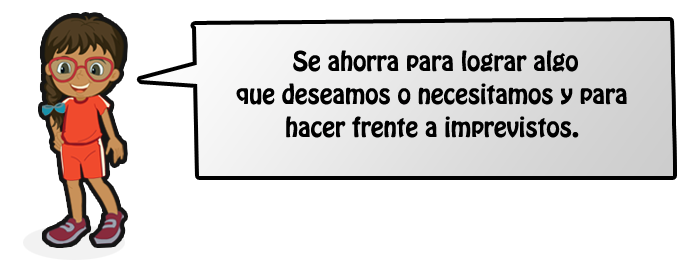
<style>
.page{position:relative;width:700px;height:270px;background:#ffffff}
.page>*{position:absolute;margin:0}
.t1{font:24px/33px "HoboStd";color:#000000}
</style>
<div class="page">
<p class="t1" style="left:236px;top:50px;width:391px;height:88px;text-align:center">Se ahorra para lograr algo<br>que deseamos o necesitamos y para<br>hacer frente a imprevistos.</p>
</div>
